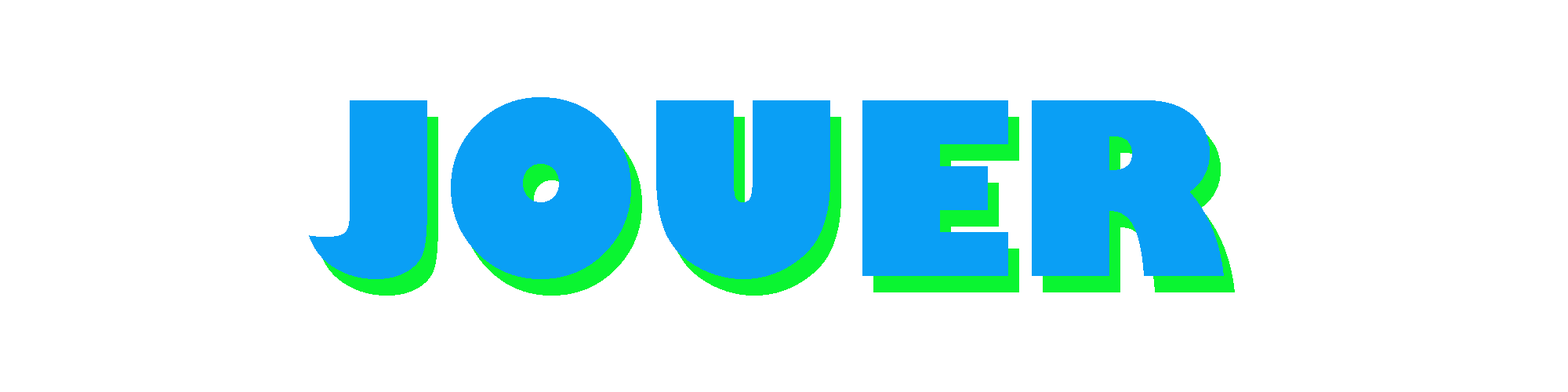
<style>
.page{position:relative;width:1568px;height:392px;background:#ffffff}
.page>*{position:absolute;margin:0}
.t1{font:235.2px "GillSans-UltraBold";color:#0a9ff5}
</style>
<div class="page">
<p class="t1" style="left:309px;top:97px;width:915px;height:182px">JOUER</p>
<p class="t1" style="left:320px;top:114px;width:915px;height:182px">JOUER</p>
</div>
